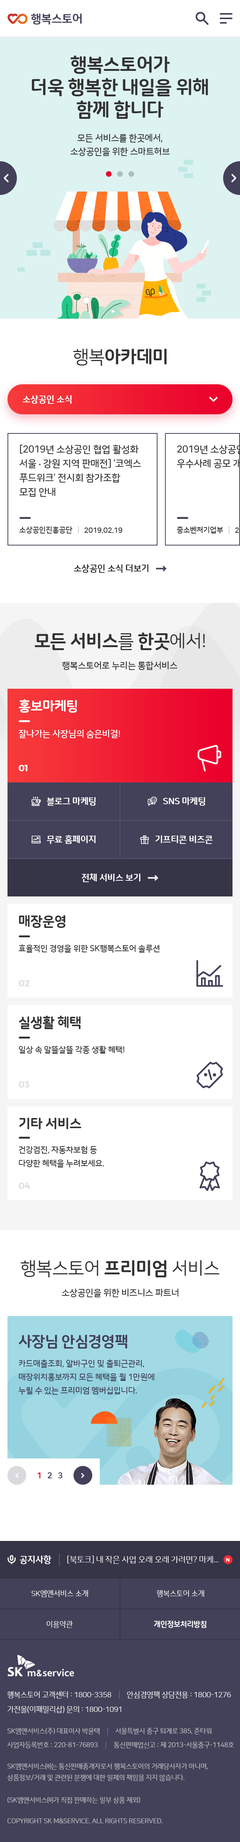
<style>
.page{position:relative;width:240px;height:1842px;background:#ffffff}
.page>*{position:absolute;margin:0}
.t1{font:11.7px "NanumSquareRoundEB";letter-spacing:-0.025em;color:#434159}
.t2{font:18.8px/22.5px "NanumSquareRoundEB";letter-spacing:-0.025em;color:#333333}
.t3{font:9px/13.5px "NanumSquareRoundB";letter-spacing:-0.025em;color:#333333}
.t4{font:18px "NanumSquareRoundEB";letter-spacing:-0.025em;color:#333333}
.t5{font:18px "NanumSquareRoundR";letter-spacing:-0.025em;color:#333333}
.t6{font:9px "NanumSquareRoundEB";letter-spacing:-0.025em;color:#ffffff}
.t7{font:9.8px/14.2px "NanumSquareRoundB";letter-spacing:-0.025em;color:#333333}
.t8{font:7.5px "NanumSquareRoundB";letter-spacing:-0.025em;color:#333333}
.t9{font:9px "NanumSquareRoundEB";letter-spacing:-0.025em;color:#333333}
.t10{font:9px "NanumSquareRoundB";letter-spacing:-0.025em;color:#333333}
.t11{font:13.5px "NanumSquareRoundEB";letter-spacing:-0.025em;color:#ffffff}
.t12{font:9px "NanumSquareRoundB";letter-spacing:-0.025em;color:#ffffff}
.t13{font:9px "Montserrat-Bold";letter-spacing:-0.025em;color:#ffffff}
.t14{font:13.5px "NanumSquareRoundEB";letter-spacing:-0.025em;color:#333333}
.t15{font:8.2px "NanumSquareRoundB";letter-spacing:-0.025em;color:#333333}
.t16{font:9px "Montserrat-Bold";letter-spacing:-0.025em;color:#e0e0e0}
.t17{font:8.2px/13.5px "NanumSquareRoundB";letter-spacing:-0.025em;color:#333333}
.t18{font:15px "NanumSquareRoundEB";letter-spacing:-0.025em;color:#434159}
.t19{font:8.2px/13.5px "NanumSquareRoundB";letter-spacing:-0.025em;color:#434159}
.t20{font:8.2px "NanumSquareRoundEB";letter-spacing:-0.025em;color:#434159}
.t21{font:8.2px "NanumSquareRoundEB";letter-spacing:-0.025em;color:#eb022d}
.t22{font:8.2px "NanumSquareRoundR";letter-spacing:-0.025em;color:#ffffff}
.t23{font:5px "Montserrat-Bold";letter-spacing:-0.025em;color:#ffffff}
.t24{font:7.5px "NanumSquareRoundR";letter-spacing:-0.025em;color:#ffffff}
.t25{font:7.5px "NanumSquareRoundEB";letter-spacing:-0.025em;color:#ffffff}
.t26{font:6.8px "NanumSquareRoundR";letter-spacing:-0.025em;color:#c2c2c7}
.t27{font:6.8px/11.2px "NanumSquareRoundR";letter-spacing:-0.025em;color:#c2c2c7}
.t28{font:6.8px "NanumSquareRoundR";letter-spacing:-0.025em;color:#c2c2c7;text-transform:uppercase}
</style>
<div class="page">
<p class="t1" style="left:31px;top:14px;width:51px;height:11px">행복스토어</p>
<p class="t2" style="left:32px;top:56px;width:176px;height:63px;text-align:center">행복스토어가<br>더욱 행복한 내일을 위해<br>함께 합니다</p>
<p class="t3" style="left:70px;top:134px;width:100px;height:22px;text-align:center">모든 서비스를 한곳에서,<br>소상공인을 위한 스마트허브</p>
<p class="t4" style="left:73px;top:349px;width:94px;height:17px"><span class="t5">행복</span>아카데미</p>
<p class="t6" style="left:22px;top:395px;width:50px;height:9px">소상공인 소식</p>
<p class="t7" style="left:19px;top:445px;width:122px;height:52px">[2019년 소상공인 협업 활성화<br>서울 . 강원 지역 판매전] ‘코엑스<br>푸드위크’ 전시회 참가조합<br>모집 안내</p>
<p class="t8" style="left:19px;top:526px;width:53px;height:8px">소상공인진흥공단</p>
<p class="t8" style="left:84px;top:528px;width:38px;height:5px">2019.02.19</p>
<p class="t8" style="left:177px;top:526px;width:46px;height:8px">중소벤처기업부</p>
<p class="t9" style="left:74px;top:564px;width:74px;height:9px">소상공인 소식 더보기</p>
<p class="t4" style="left:34px;top:633px;width:171px;height:17px">모든 서비스<span class="t5">를 </span>한곳<span class="t5">에서!</span></p>
<p class="t10" style="left:62px;top:662px;width:115px;height:8px">행복스토어로 누리는 통합서비스</p>
<p class="t11" style="left:19px;top:699px;width:58px;height:14px">홍보마케팅</p>
<p class="t12" style="left:18px;top:730px;width:102px;height:8px">잘나가는 사장님의 숨은비결!</p>
<p class="t13" style="left:19px;top:765px;width:8px;height:6px">01</p>
<p class="t6" style="left:46px;top:797px;width:50px;height:9px">블로그 마케팅</p>
<p class="t6" style="left:163px;top:797px;width:42px;height:9px">SNS 마케팅</p>
<p class="t6" style="left:46px;top:835px;width:50px;height:9px">무료 홈페이지</p>
<p class="t6" style="left:155px;top:836px;width:58px;height:8px">기프티콘 비즈콘</p>
<p class="t6" style="left:82px;top:873px;width:59px;height:9px">전체 서비스 보기</p>
<p class="t14" style="left:19px;top:915px;width:46px;height:13px">매장운영</p>
<p class="t15" style="left:18px;top:945px;width:142px;height:8px">효율적인 경영을 위한 SK행복스토어 솔루션</p>
<p class="t16" style="left:19px;top:980px;width:11px;height:7px">02</p>
<p class="t14" style="left:19px;top:1016px;width:62px;height:13px">실생활 혜택</p>
<p class="t15" style="left:19px;top:1046px;width:105px;height:8px">일상 속 알뜰살뜰 각종 생활 혜택!</p>
<p class="t16" style="left:19px;top:1082px;width:11px;height:6px">03</p>
<p class="t14" style="left:19px;top:1118px;width:62px;height:12px">기타 서비스</p>
<p class="t17" style="left:19px;top:1146px;width:85px;height:22px">건강검진, 자동차보험 등<br>다양한 혜택을 누려보세요.</p>
<p class="t16" style="left:19px;top:1183px;width:11px;height:6px">04</p>
<p class="t5" style="left:21px;top:1260px;width:198px;height:18px">행복스토어<span class="t4"> 프리미엄 </span>서비스</p>
<p class="t10" style="left:62px;top:1289px;width:116px;height:9px">소상공인을 위한 비즈니스 파트너</p>
<p class="t18" style="left:19px;top:1335px;width:109px;height:14px">사장님 안심경영팩</p>
<p class="t19" style="left:18px;top:1360px;width:136px;height:35px">카드매출조회, 알바구인 및 출퇴근관리,<br>매장위치홍보까지 모든 혜택을 월 1만원에<br>누릴 수 있는 프리미엄 멤버십입니다.</p>
<p class="t20" style="left:38px;top:1473px;width:25px;height:6px"><span class="t21">1</span>   2   3</p>
<p class="t6" style="left:20px;top:1556px;width:31px;height:8px">공지사항</p>
<p class="t22" style="left:67px;top:1556px;width:152px;height:8px">[북토크] 내 작은 사업 오래 오래 가려면? 마케...</p>
<p class="t23" style="left:226px;top:1558px;width:4px;height:4px">N</p>
<p class="t24" style="left:32px;top:1590px;width:56px;height:8px">SK엠앤서비스 소개</p>
<p class="t24" style="left:156px;top:1590px;width:48px;height:8px">행복스토어 소개</p>
<p class="t24" style="left:46px;top:1621px;width:27px;height:7px">이용약관</p>
<p class="t25" style="left:154px;top:1621px;width:52px;height:7px">개인정보처리방침</p>
<p class="t24" style="left:7px;top:1692px;width:104px;height:7px">행복스토어 고객센터 : 1800-3358</p>
<p class="t24" style="left:127px;top:1692px;width:104px;height:7px">안심경영팩 상담전용 : 1800-1276</p>
<p class="t24" style="left:8px;top:1706px;width:114px;height:7px">가전몰(이패밀리샵) 문의 : 1800-1091</p>
<p class="t26" style="left:8px;top:1728px;width:92px;height:7px">SK엠앤서비스(주) 대표이사 박윤택</p>
<p class="t26" style="left:115px;top:1728px;width:97px;height:7px">서울특별시 중구 퇴계로 385, 준타워</p>
<p class="t26" style="left:7px;top:1742px;width:91px;height:7px">사업자등록번호 : 220-81-76893</p>
<p class="t26" style="left:114px;top:1742px;width:120px;height:7px">통신판매업신고 : 제 2013-서울중구-1148호</p>
<p class="t27" style="left:7px;top:1763px;width:201px;height:41px">SK엠앤서비스㈜는 통신판매중개자로서 행복스토어의 거래당사자가 아니며,<br>상품정보/거래 및 관련된 분쟁에 대한 일체의 책임을 지지 않습니다.<br><br>(SK엠앤서비스㈜가 직접 판매하는 일부 상품 제외)</p>
<p class="t28" style="left:8px;top:1819px;width:155px;height:5px">Copyright SK m&amp;service. All Rights Reserved.</p>
</div>
